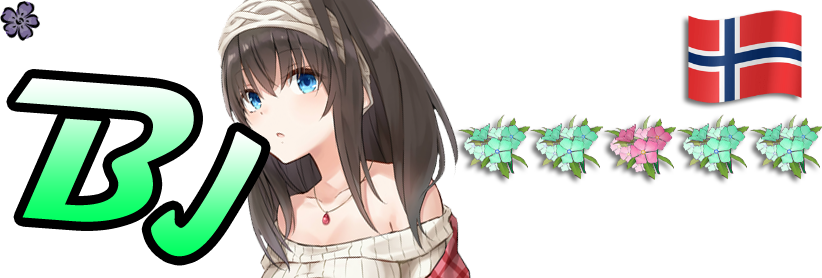
<style>
.page{position:relative;width:822px;height:278px;background:#ffffff}
.page>*{position:absolute;margin:0}
.t1{font:202.7px "Magneto-Bold"}
.t2{font:165.3px "HoboStd"}
</style>
<div class="page">
<p class="t1" style="left:15px;top:78px;width:179px;height:144px;rotate:4deg">B</p>
<p class="t2" style="left:151px;top:131px;width:111px;height:126px;rotate:33deg">J</p>
</div>
